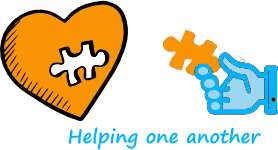
<style>
.page{position:relative;width:278px;height:150px;background:#ffffff}
.page>*{position:absolute;margin:0}
.t1{font:18.8px "SegoePrint-Bold";color:#00b3fe}
</style>
<div class="page">
<p class="t1" style="left:68px;top:127px;width:193px;height:23px">Helping one another</p>
</div>
